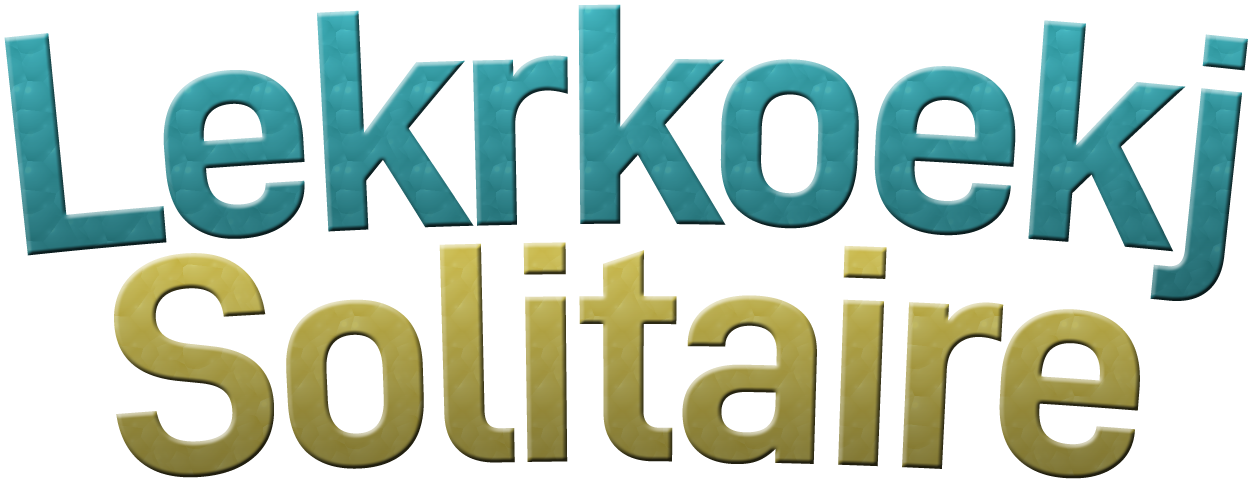
<style>
.page{position:relative;width:1252px;height:483px;background:#ffffff}
.page>*{position:absolute;margin:0}
.t1{font:317px "D-DIN-Bold";letter-spacing:-0.036em}
</style>
<div class="page">
<p class="t1" style="left:4px;top:4px;width:1244px;height:297px">Lekrkoekj</p>
<p class="t1" style="left:114px;top:242px;width:1026px;height:237px">Solitaire</p>
</div>
